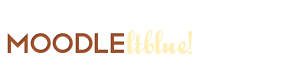
<style>
.page{position:relative;width:300px;height:80px;background:#ffffff}
.page>*{position:absolute;margin:0}
.t1{font:37px "QuigleyWiggly";letter-spacing:-0.005em;color:#ffefbb}
.t2{font:37px "Telegrafico";letter-spacing:-0.075em;color:#a6512a}
</style>
<div class="page">
<p class="t1" style="left:127px;top:30px;width:66px;height:25px">ltblue!</p>
<p class="t2" style="left:7px;top:33px;width:117px;height:20px">moodle</p>
</div>
